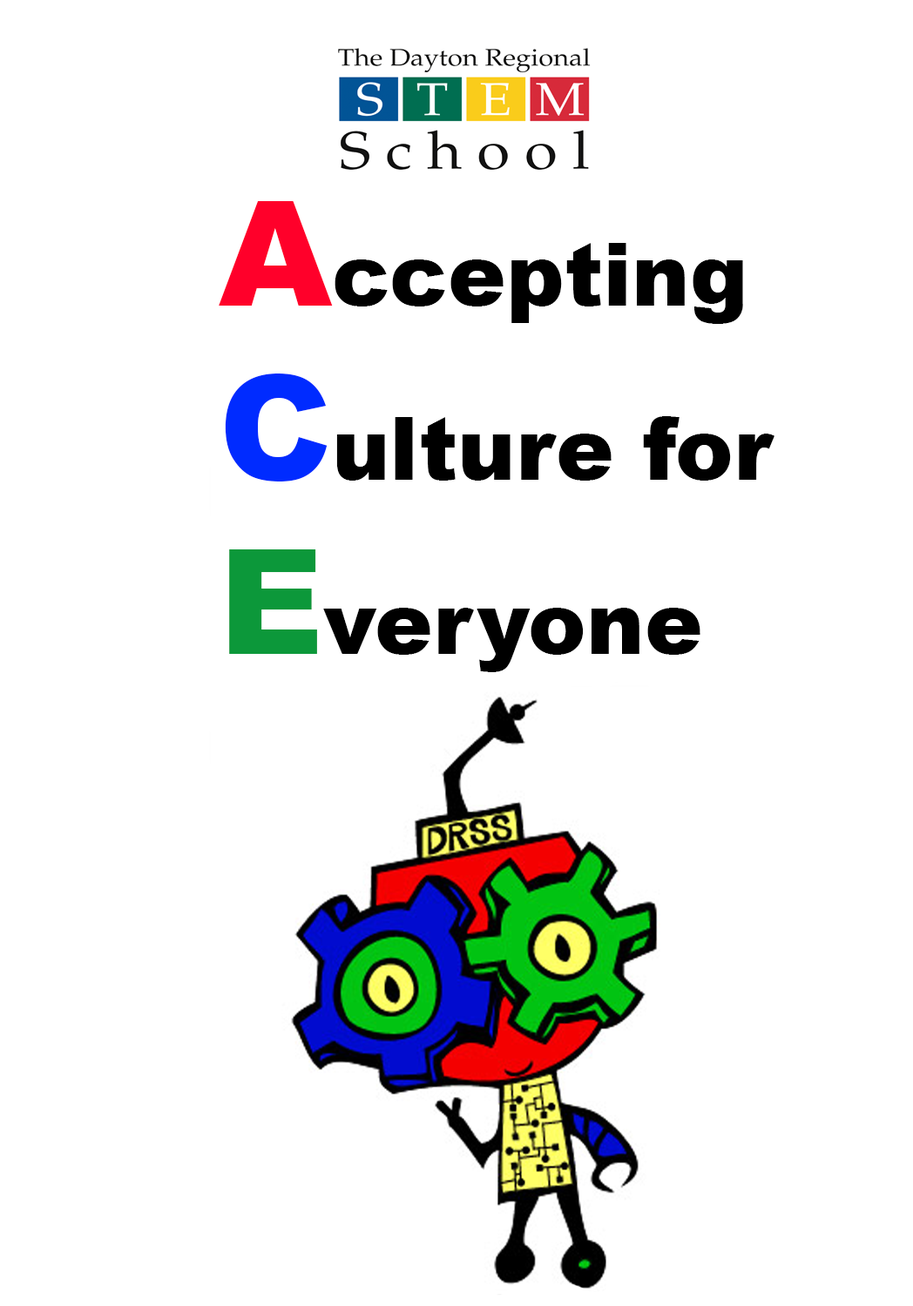
<style>
.page{position:relative;width:913px;height:1306px;background:#ffffff}
.page>*{position:absolute;margin:0}
.t1{font:87.1px "Arial-Black";color:#000000}
.t2{font:145.2px "Arial-Black";color:#ff002a}
.t3{font:145.2px "Arial-Black";color:#002bff}
.t4{font:145.2px "Arial-Black";color:#0c983a}
</style>
<div class="page">
<p class="t1" style="left:219px;top:201px;width:555px;height:471px"><span class="t2">A</span>ccepting<br><span class="t3">C</span>ulture for<br><span class="t4">E</span>veryone</p>
</div>
